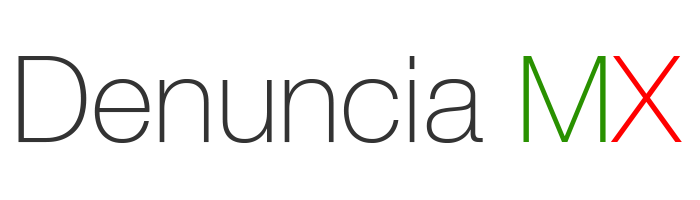
<style>
.page{position:relative;width:700px;height:200px;background:#ffffff}
.page>*{position:absolute;margin:0}
.t1{font:120px "HelveticaNeue-Thin";color:#333333}
.t2{font:120px "HelveticaNeue-Thin";color:#299100}
.t3{font:120px "HelveticaNeue-Thin";color:#ff0000}
</style>
<div class="page">
<p class="t1" style="left:18px;top:56px;width:664px;height:87px">Denuncia <span class="t2">M</span><span class="t3">X</span></p>
</div>
